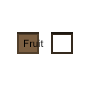
<style>
.page{position:relative;width:100px;height:100px;background:#ffffff}
.page>*{position:absolute;margin:0}
.t1{font:10px "ArialMT";color:#000000}
</style>
<div class="page">
<p class="t1" style="left:24px;top:39px;width:20px;height:8px">Fruit</p>
</div>
